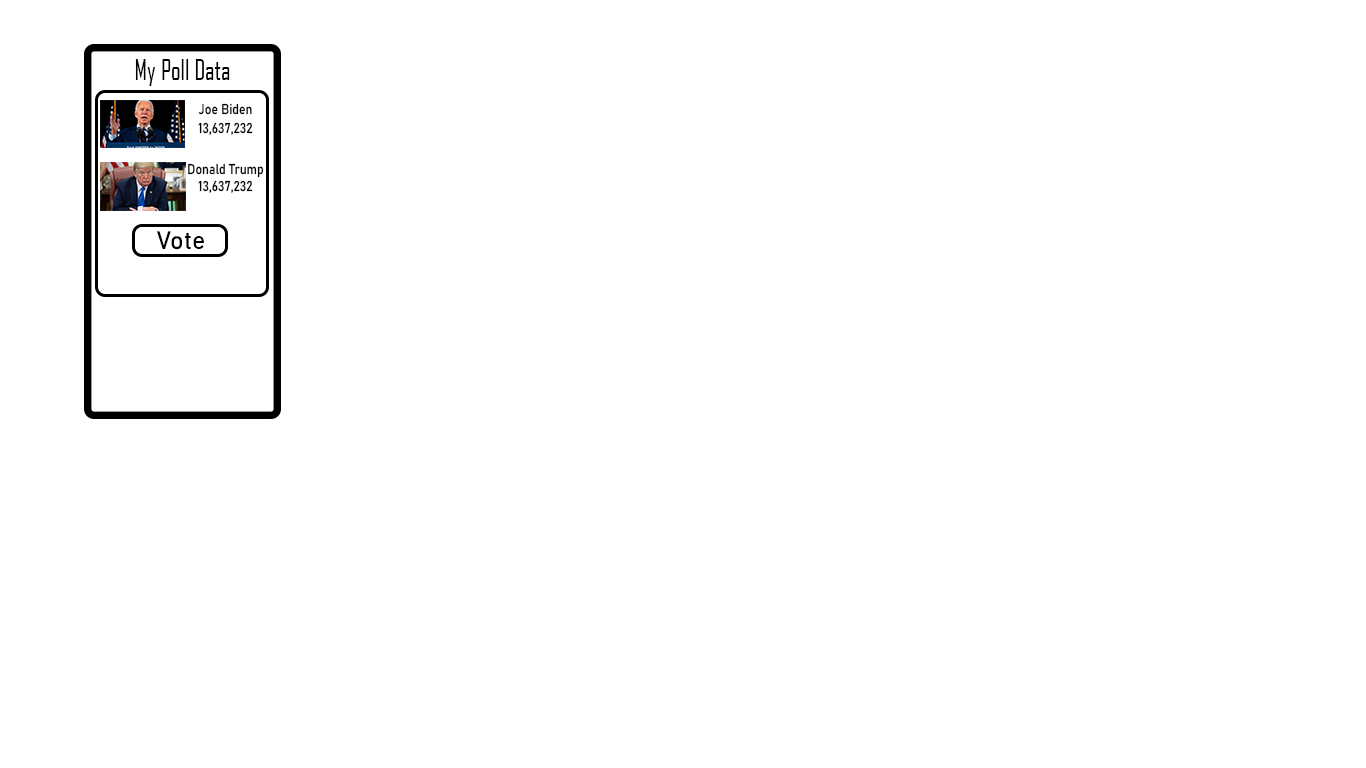
<style>
.page{position:relative;width:1366px;height:768px;background:#ffffff}
.page>*{position:absolute;margin:0}
.t1{font:28.1px "AgencyFB-Reg";color:#010101;scale:0.89 1}
.t2{font:13.9px "Bahnschrift";color:#010101;scale:0.89 1}
.t3{font:25px "Bahnschrift";color:#010101}
</style>
<div class="page">
<p class="t1" style="left:135px;top:59px;width:95px;height:27px">My Poll Data</p>
<p class="t2" style="left:198px;top:103px;width:54px;height:12px">Joe Biden</p>
<p class="t2" style="left:198px;top:122px;width:55px;height:13px">13,637,232</p>
<p class="t2" style="left:188px;top:163px;width:76px;height:15px">Donald Trump</p>
<p class="t2" style="left:198px;top:180px;width:55px;height:13px">13,637,232</p>
<p class="t3" style="left:157px;top:231px;width:47px;height:19px">Vote</p>
</div>
